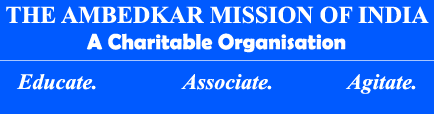
<style>
.page{position:relative;width:434px;height:114px;background:#005aff}
.page>*{position:absolute;margin:0}
.t1{font:24px "TimesNewRomanPS-BoldMT";color:#ffffff}
.t2{font:22px "BerlinSansFBDemi-Bold";color:#ffffff}
.t3{font:22px "TimesNewRomanPS-BoldItalicMT";color:#ffffff}
</style>
<div class="page">
<p class="t1" style="left:6px;top:6px;width:423px;height:47px;text-align:center">THE AMBEDKAR MISSION OF INDIA<br><span class="t2">A Charitable Organisation</span></p>
<p class="t3" style="left:16px;top:74px;width:400px;height:20px">Educate.   Associate.   Agitate.</p>
</div>
